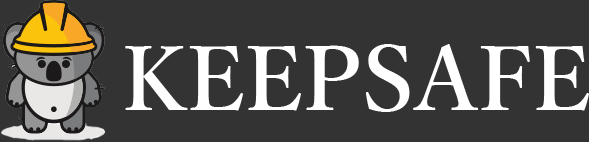
<style>
.page{position:relative;width:589px;height:142px;background:#333333}
.page>*{position:absolute;margin:0}
.t1{font:88px "YuMincho-Demibold";color:#ffffff}
</style>
<div class="page">
<p class="t1" style="left:125px;top:44px;width:464px;height:68px">KEEPSAFE</p>
</div>
